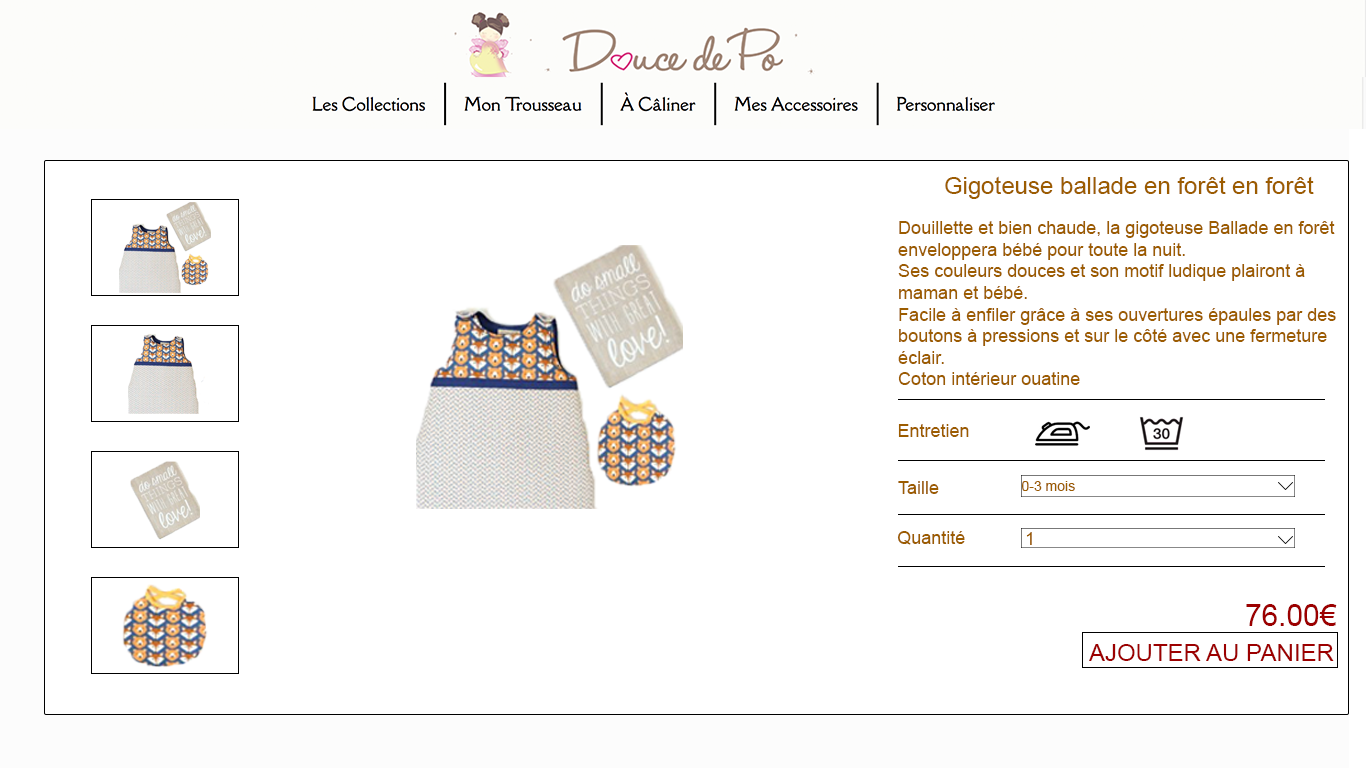
<style>
.page{position:relative;width:1366px;height:768px;background:#ffffff}
.page>*{position:absolute;margin:0}
.t1{font:24px "ArialMT";color:#9c5c00}
.t2{font:18px "ArialMT";color:#9c5c00}
.t3{font:14px "ArialMT";color:#9c5c00}
.t4{font:30px "ArialMT";color:#9c0000}
.t5{font:24px "ArialMT";color:#9c0000}
</style>
<div class="page">
<p class="t1" style="left:945px;top:176px;width:369px;height:23px">Gigoteuse ballade en forêt en forêt</p>
<p class="t2" style="left:898px;top:221px;width:438px;height:164px">Douillette et bien chaude, la gigoteuse Ballade en forêt enveloppera bébé pour toute la nuit.<br>Ses couleurs douces et son motif ludique plairont à  maman et bébé.<br>Facile à enfiler grâce à ses ouvertures épaules par des boutons à pressions et sur le côté avec une fermeture éclair.<br>Coton intérieur ouatine</p>
<p class="t2" style="left:898px;top:424px;width:71px;height:13px">Entretien</p>
<p class="t2" style="left:898px;top:481px;width:41px;height:13px">Taille</p>
<p class="t3" style="left:1022px;top:481px;width:53px;height:10px">0-3 mois</p>
<p class="t2" style="left:897px;top:531px;width:68px;height:14px">Quantité</p>
<p class="t2" style="left:1026px;top:532px;width:6px;height:13px">1</p>
<p class="t4" style="left:1246px;top:604px;width:91px;height:22px">76.00€</p>
<p class="t5" style="left:1089px;top:644px;width:245px;height:17px">AJOUTER AU PANIER</p>
</div>
